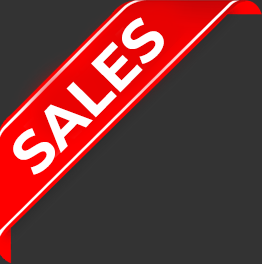
<style>
.page{position:relative;width:262px;height:264px;background:#333333}
.page>*{position:absolute;margin:0}
.t1{font:58.1px "Montserrat-Bold";color:#ffffff}
</style>
<div class="page">
<p class="t1" style="left:13px;top:17px;width:151px;height:158px;rotate:-46deg">SALES</p>
</div>
